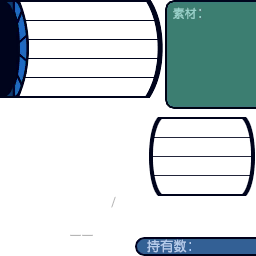
<style>
.page{position:relative;width:256px;height:256px;background:#ffffff}
.page>*{position:absolute;margin:0}
.t1{font:12px "FZY3--GB1-4";letter-spacing:0.025em;color:#96d0c8;scale:0.97 1}
.t2{font:13.3px "FZY3--GB1-4";letter-spacing:0.025em;color:#b3cbec;scale:0.97 1}
</style>
<div class="page">
<p class="t1" style="left:173px;top:7px;width:24px;height:13px">素材</p>
<p class="t2" style="left:147px;top:239px;width:40px;height:14px">持有数</p>
</div>
